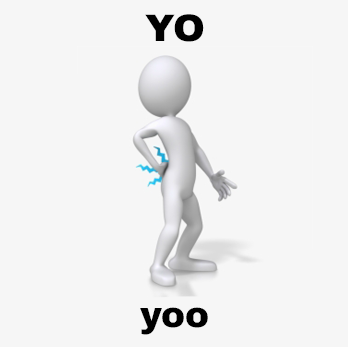
<style>
.page{position:relative;width:348px;height:347px;background:#f6f6f6}
.page>*{position:absolute;margin:0}
.t1{font:38.2px "ArchivoBlack-Regular";color:#000000}
.t2{font:36.1px "ArchivoBlack-Regular";color:#000000}
</style>
<div class="page">
<p class="t1" style="left:145px;top:14px;width:59px;height:28px">YO</p>
<p class="t2" style="left:140px;top:307px;width:68px;height:28px">yoo</p>
</div>
